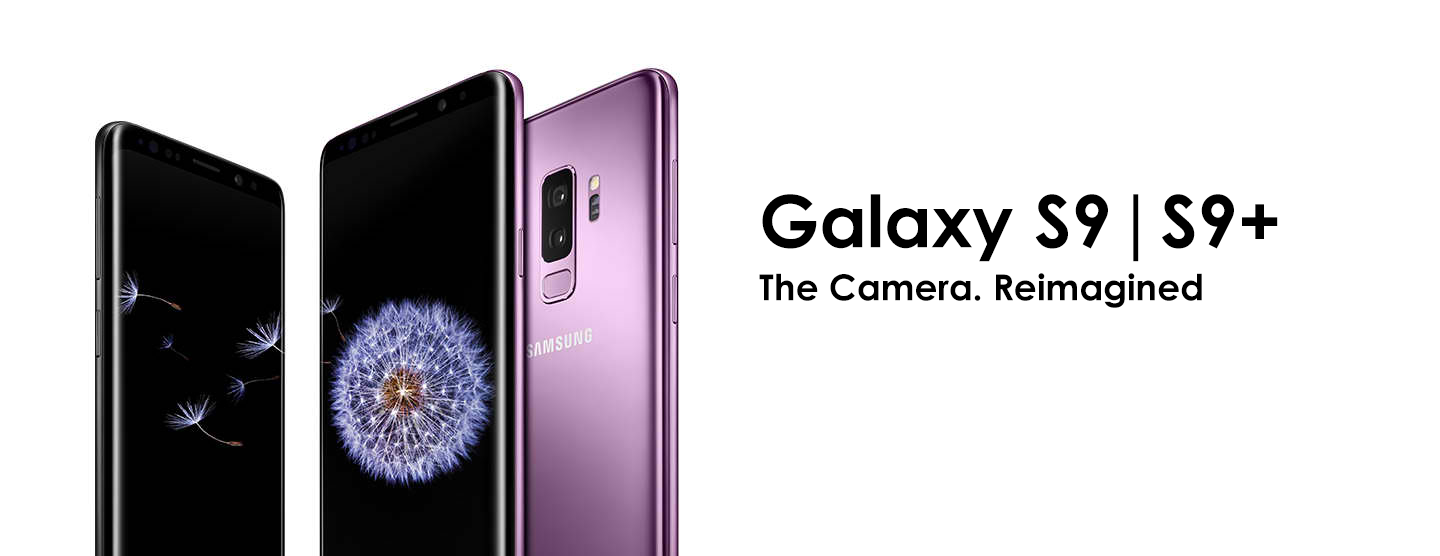
<style>
.page{position:relative;width:1440px;height:556px;background:#ffffff}
.page>*{position:absolute;margin:0}
.t1{font:72px "CenturyGothic-Bold";color:#000000}
.t2{font:72px "CenturyGothic";color:#000000}
.t3{font:36px "CenturyGothic-Bold";color:#000000}
</style>
<div class="page">
<p class="t1" style="left:762px;top:194px;width:516px;height:68px">Galaxy S9<span class="t2">|</span>S9+</p>
<p class="t3" style="left:759px;top:273px;width:443px;height:35px">The Camera. Reimagined</p>
</div>
